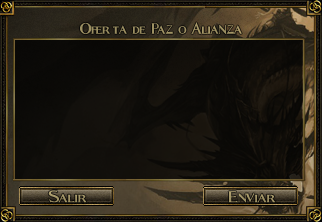
<style>
.page{position:relative;width:322px;height:222px}
.page>*{position:absolute;margin:0}
.t1{font:28.9px "Fleet-Street";color:#9d9063;scale:0.94 1}
.t2{font:30px "Fleet-Street";color:#a29466}
</style>
<div class="page">
<p class="t1" style="left:80px;top:22px;width:162px;height:13px">Oferta de Paz o Alianza</p>
<p class="t2" style="left:48px;top:190px;width:39px;height:13px">Salir</p>
<p class="t2" style="left:228px;top:191px;width:48px;height:12px">Enviar</p>
</div>
